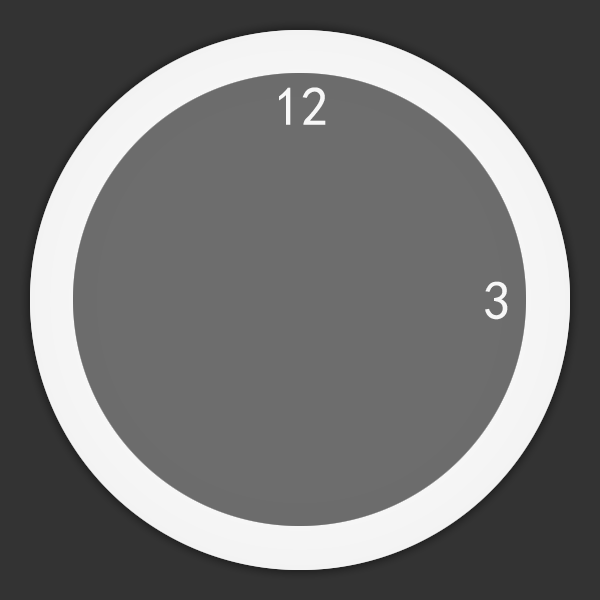
<style>
.page{position:relative;width:600px;height:600px;background:#6d6d6d}
.page>*{position:absolute;margin:0}
.t1{font:55px "KaiTi";color:#f7f7f7}
</style>
<div class="page">
<p class="t1" style="left:279px;top:87px;width:47px;height:38px">12</p>
<p class="t1" style="left:485px;top:281px;width:23px;height:39px">3</p>
</div>
